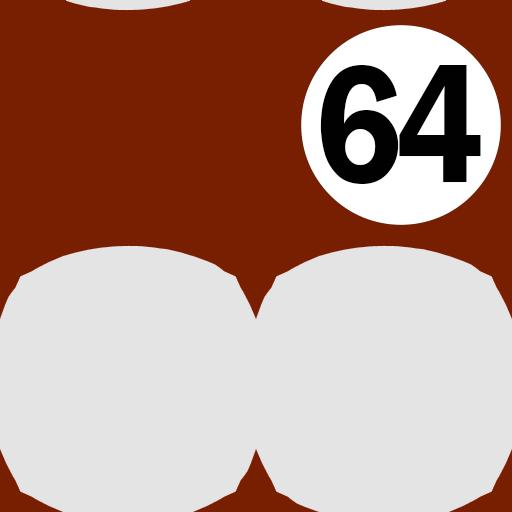
<style>
.page{position:relative;width:512px;height:512px;background:#e4e4e4}
.page>*{position:absolute;margin:0}
.t1{font:172.5px "FranklinGothic-Demi";letter-spacing:-0.05em;color:#010101;scale:0.87 1}
</style>
<div class="page">
<p class="t1" style="left:320px;top:65px;width:161px;height:119px">64</p>
</div>
